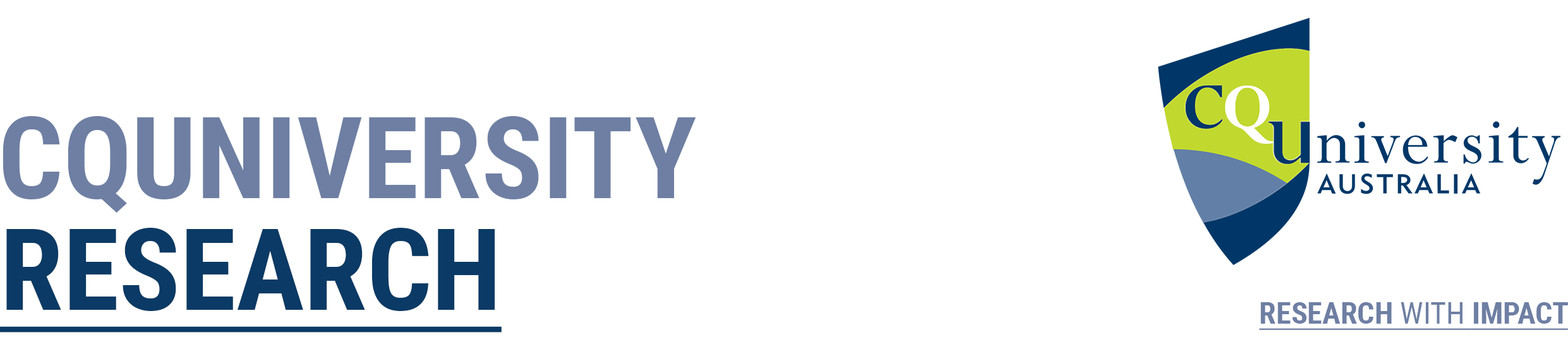
<style>
.page{position:relative;width:1568px;height:347px;background:#ffffff}
.page>*{position:absolute;margin:0}
.t1{font:113.8px "RobotoCondensed-Bold";color:#6e7fa3}
.t2{font:113.8px "RobotoCondensed-Bold";color:#0a3a65;text-decoration:underline}
.t3{font:30.4px "RobotoCondensed-Bold";color:#6e7fa3;text-decoration:underline}
.t4{font:30.4px "RobotoCondensed-Regular";color:#6e7fa3;text-decoration:underline}
</style>
<div class="page">
<p class="t1" style="left:3px;top:116px;width:693px;height:98px">CQUNIVERSITY</p>
<p class="t2" style="left:0px;top:228px;width:502px;height:105px">RESEARCH</p>
<p class="t3" style="left:1259px;top:303px;width:309px;height:27px">RESEARCH <span class="t4">WITH </span>IMPACT</p>
</div>
